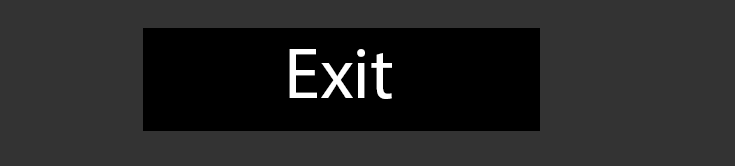
<style>
.page{position:relative;width:735px;height:166px;background:#333333}
.page>*{position:absolute;margin:0}
.t1{font:72px "MyriadPro-Regular";color:#ffffff}
</style>
<div class="page">
<p class="t1" style="left:289px;top:49px;width:103px;height:50px">Exit</p>
</div>
